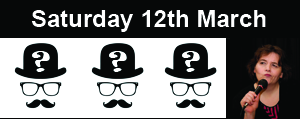
<style>
.page{position:relative;width:300px;height:119px;background:#ffffff}
.page>*{position:absolute;margin:0}
.t1{font:24px "Arial-BoldMT";color:#ffffff}
</style>
<div class="page">
<p class="t1" style="left:31px;top:10px;width:235px;height:22px">Saturday 12th March</p>
</div>
